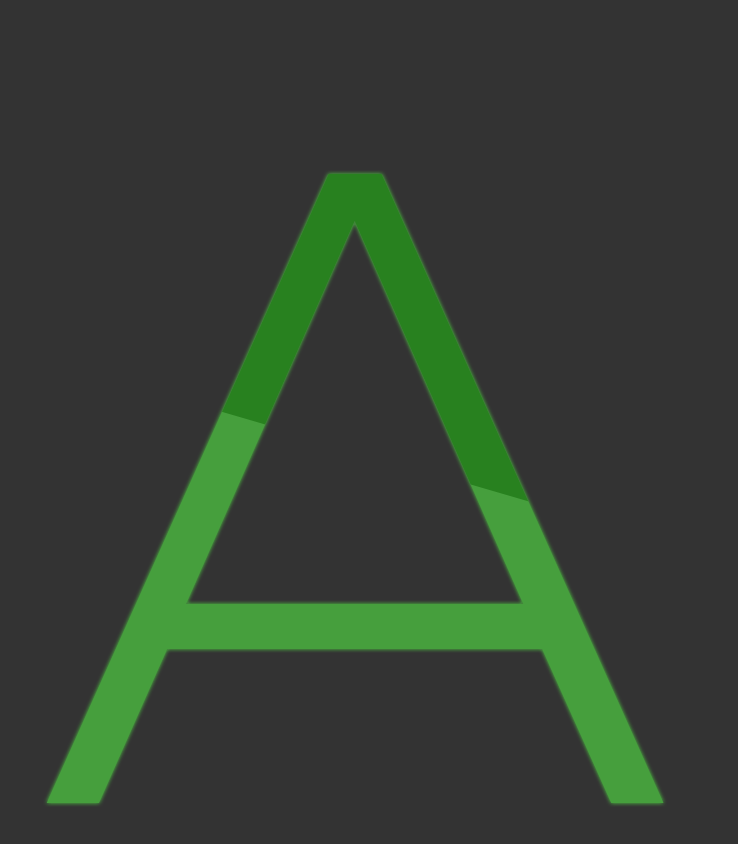
<style>
.page{position:relative;width:738px;height:844px;background:#333333}
.page>*{position:absolute;margin:0}
.t1{font:897.6px "NexaLight"}
</style>
<div class="page">
<p class="t1" style="left:46px;top:174px;width:618px;height:629px">A</p>
</div>
